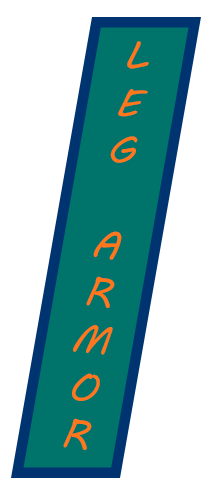
<style>
.page{position:relative;width:216px;height:504px;background:#ffffff}
.page>*{position:absolute;margin:0}
.t1{font:40px "MVBoli";color:#ff761b}
</style>
<div class="page">
<p class="t1" style="left:63px;top:41px;width:86px;height:409px;text-align:center;rotate:9deg">L<br>E<br>G<br><br>A<br>R<br>M<br>O<br>R</p>
</div>
